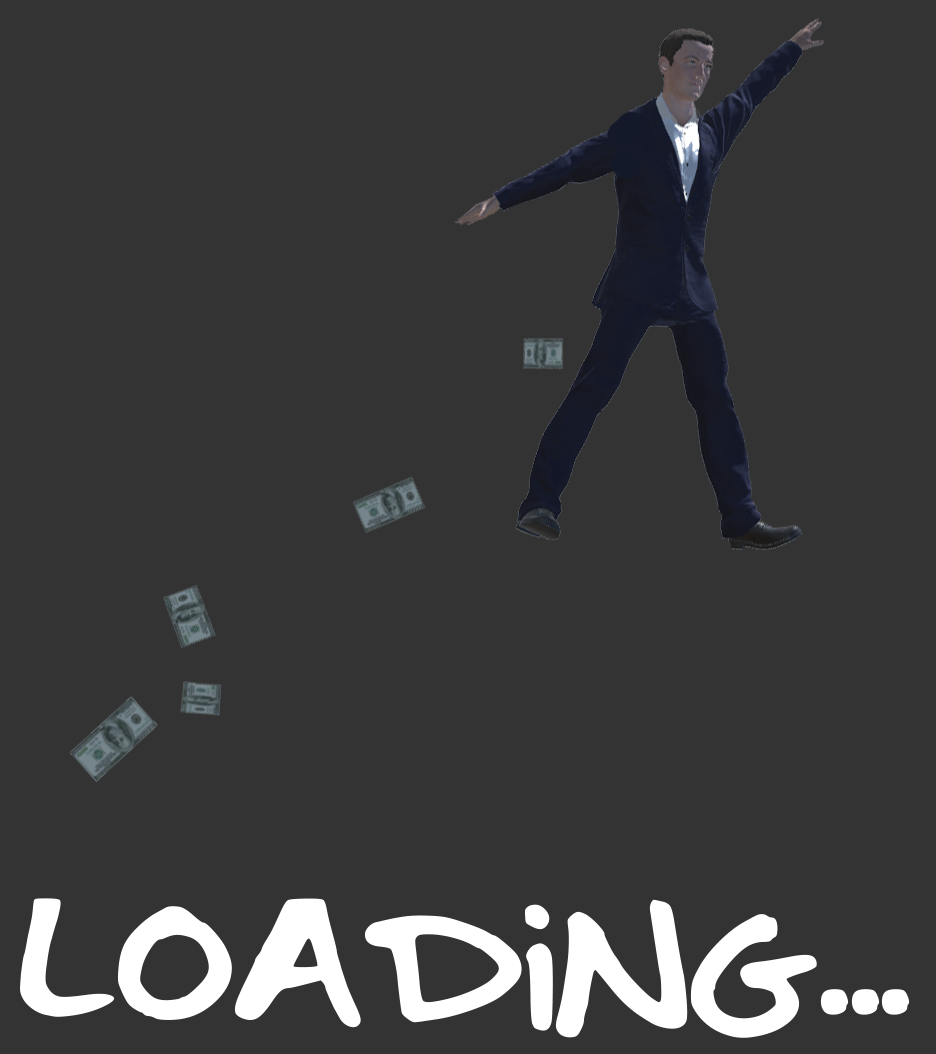
<style>
.page{position:relative;width:936px;height:1054px;background:#333333}
.page>*{position:absolute;margin:0}
.t1{font:197.3px "emilyyyyyy";color:#ffffff}
</style>
<div class="page">
<p class="t1" style="left:20px;top:898px;width:890px;height:140px">LOADING...</p>
</div>
